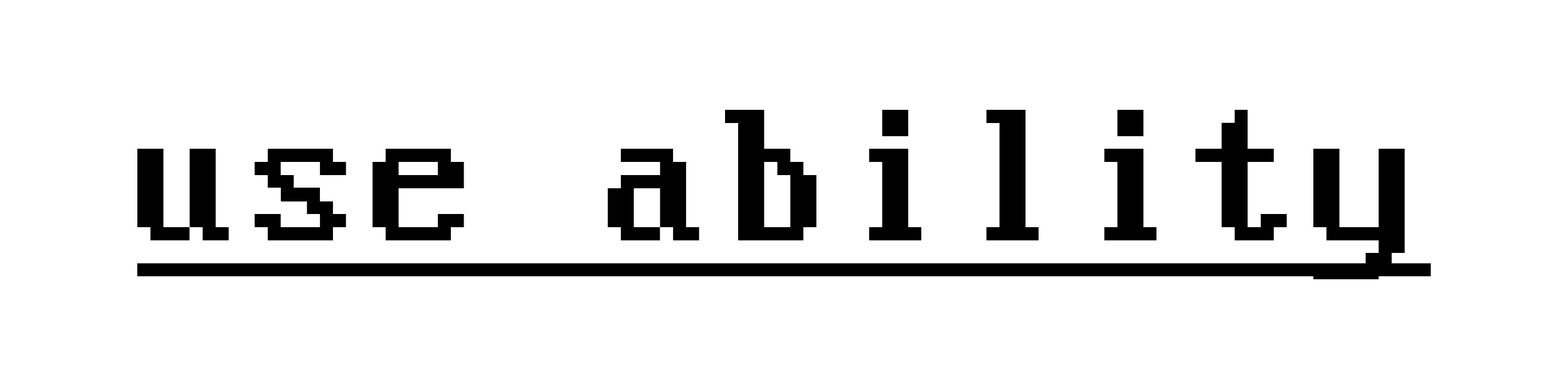
<style>
.page{position:relative;width:1568px;height:369px;background:#ffffff}
.page>*{position:absolute;margin:0}
.t1{font:209.1px "PerfectDOSVGA437";color:#000000;text-decoration:underline}
</style>
<div class="page">
<p class="t1" style="left:137px;top:110px;width:1294px;height:169px">use ability</p>
</div>
